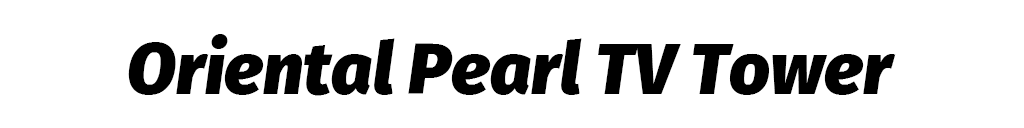
<style>
.page{position:relative;width:1024px;height:128px;background:#ffffff}
.page>*{position:absolute;margin:0}
.t1{font:71.8px "FiraSans-BlackItalic";color:#000000}
</style>
<div class="page">
<p class="t1" style="left:128px;top:34px;width:768px;height:62px">Oriental Pearl TV Tower</p>
</div>
